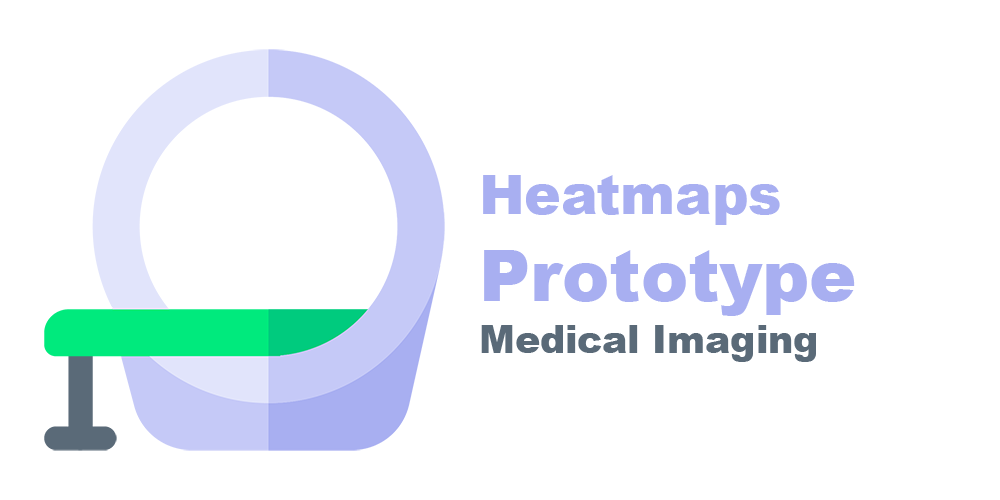
<style>
.page{position:relative;width:1000px;height:500px;background:#ffffff}
.page>*{position:absolute;margin:0}
.t1{font:54.6px "Arial-Black";color:#a8aff1}
.t2{font:70.5px "Arial-Black";color:#a8aff1}
.t3{font:37.6px "Arial-Black";color:#5a6a78}
</style>
<div class="page">
<p class="t1" style="left:483px;top:175px;width:297px;height:50px">Heatmaps</p>
<p class="t2" style="left:484px;top:250px;width:371px;height:66px">Prototype</p>
<p class="t3" style="left:481px;top:325px;width:335px;height:37px">Medical Imaging</p>
</div>
